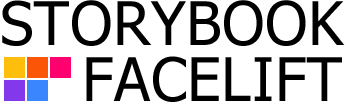
<style>
.page{position:relative;width:345px;height:102px;background:#ffffff}
.page>*{position:absolute;margin:0}
.t1{font:60px "Tahoma";letter-spacing:0.01em;color:#000000}
</style>
<div class="page">
<p class="t1" style="left:2px;top:0px;width:343px;height:46px">STORYBOOK</p>
<p class="t1" style="left:86px;top:56px;width:256px;height:46px">FACELIFT</p>
</div>
